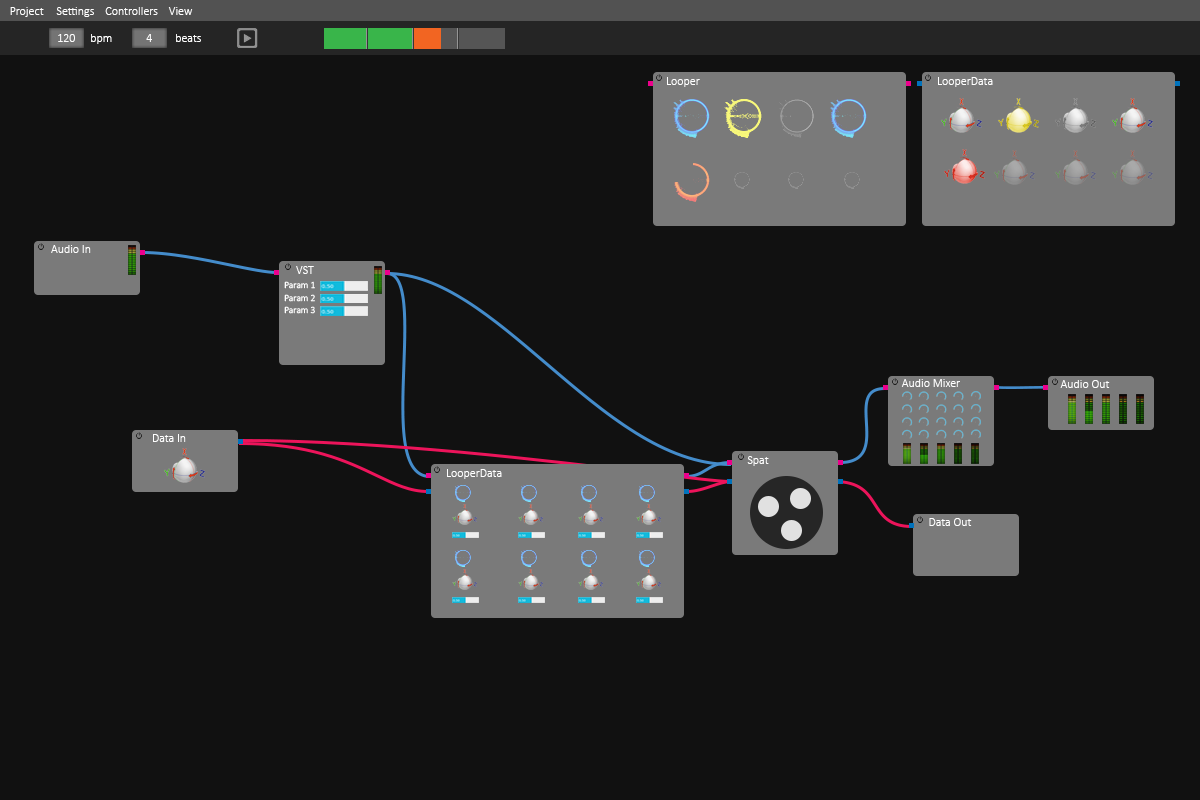
<style>
.page{position:relative;width:1200px;height:800px;background:#111111}
.page>*{position:absolute;margin:0}
.t1{font:12px "Calibri-Light";color:#ffffff}
.t2{font:9.5px "Calibri-Light";color:#ffffff}
</style>
<div class="page">
<p class="t1" style="left:10px;top:7px;width:183px;height:10px">Project     Settings    Controllers    View</p>
<p class="t1" style="left:58px;top:34px;width:17px;height:8px">120</p>
<p class="t1" style="left:91px;top:34px;width:21px;height:10px">bpm</p>
<p class="t1" style="left:146px;top:34px;width:6px;height:8px">4</p>
<p class="t1" style="left:176px;top:34px;width:25px;height:8px">beats</p>
<p class="t1" style="left:667px;top:77px;width:33px;height:10px">Looper</p>
<p class="t1" style="left:938px;top:77px;width:55px;height:10px">LooperData</p>
<p class="t1" style="left:51px;top:245px;width:40px;height:8px">Audio In</p>
<p class="t1" style="left:296px;top:266px;width:18px;height:8px">VST</p>
<p class="t2" style="left:284px;top:281px;width:31px;height:8px">Param 1</p>
<p class="t2" style="left:284px;top:294px;width:31px;height:8px">Param 2</p>
<p class="t2" style="left:284px;top:306px;width:31px;height:8px">Param 3</p>
<p class="t1" style="left:901px;top:379px;width:59px;height:8px">Audio Mixer</p>
<p class="t1" style="left:1060px;top:380px;width:50px;height:8px">Audio Out</p>
<p class="t1" style="left:153px;top:434px;width:33px;height:8px">Data In</p>
<p class="t1" style="left:747px;top:456px;width:22px;height:10px">Spat</p>
<p class="t1" style="left:447px;top:469px;width:55px;height:10px">LooperData</p>
<p class="t1" style="left:929px;top:518px;width:43px;height:8px">Data Out</p>
</div>
